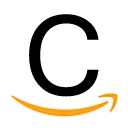
<style>
.page{position:relative;width:128px;height:128px;background:#ffffff}
.page>*{position:absolute;margin:0}
.t1{font:110.6px "MicrosoftSansSerif";color:#000000}
</style>
<div class="page">
<p class="t1" style="left:29px;top:14px;width:70px;height:83px">C</p>
</div>
